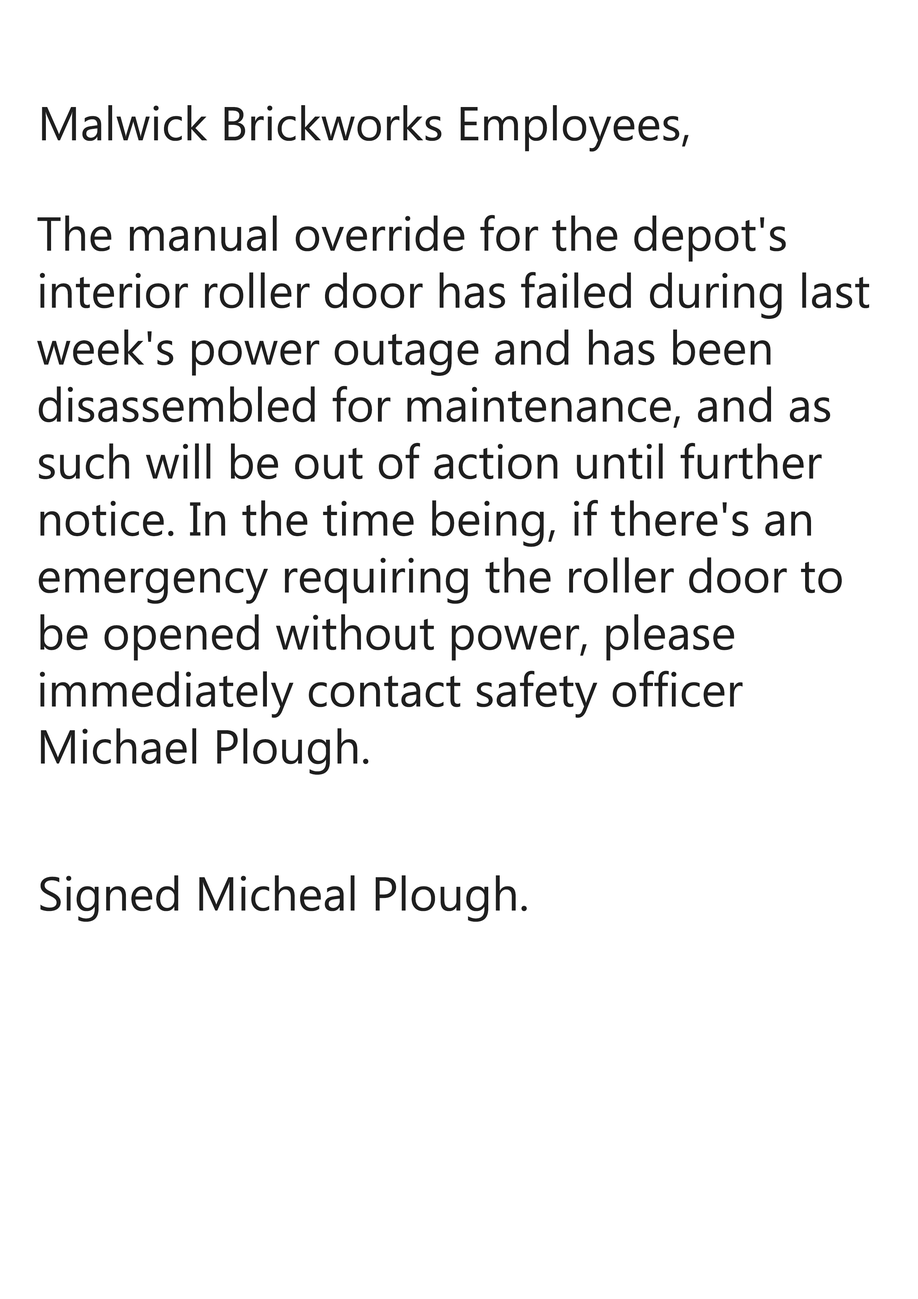
<style>
.page{position:relative;width:918px;height:1299px;background:#ffffff}
.page>*{position:absolute;margin:0}
.t1{font:47.5px "MicrosoftPhagsPa";color:#1f1f1f}
</style>
<div class="page">
<p class="t1" style="left:42px;top:105px;width:647px;height:47px">Malwick Brickworks Employees,</p>
<p class="t1" style="left:37px;top:215px;width:832px;height:560px">The manual override for the depot's<br>interior roller door has failed during last<br>week's power outage and has been<br>disassembled for maintenance, and as<br>such will be out of action until further<br>notice. In the time being, if there's an<br>emergency requiring the roller door to<br>be opened without power, please<br>immediately contact safety officer<br>Michael Plough.</p>
<p class="t1" style="left:40px;top:875px;width:487px;height:47px">Signed Micheal Plough.</p>
</div>
